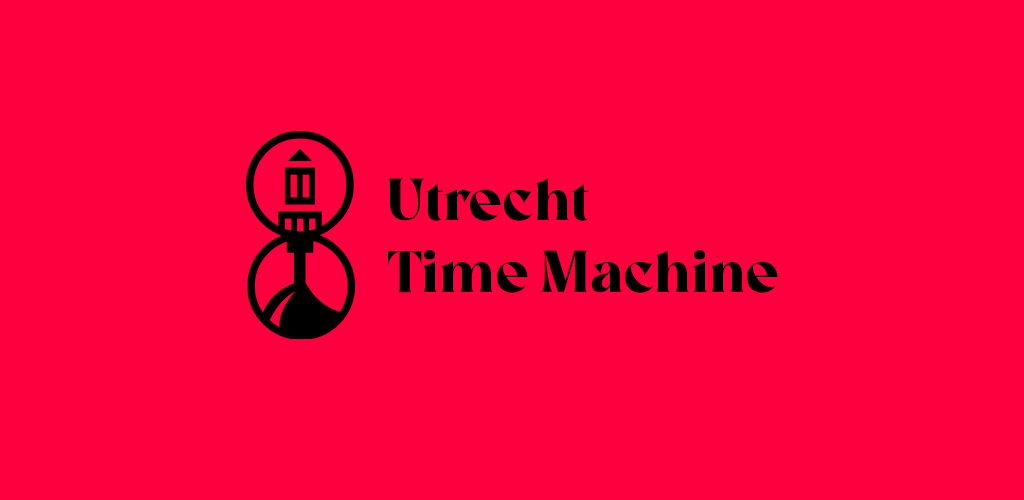
<style>
.page{position:relative;width:1024px;height:500px;background:#fe003e}
.page>*{position:absolute;margin:0}
.t1{font:60px "Room205-Regular";color:#000000}
</style>
<div class="page">
<p class="t1" style="left:387px;top:178px;width:391px;height:115px">Utrecht<br>Time Machine</p>
</div>
